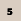
<style>
.page{position:relative;width:21px;height:21px;background:#d9cdc1}
.page>*{position:absolute;margin:0}
.t1{font:9px "Tahoma-Bold";color:#000000}
</style>
<div class="page">
<p class="t1" style="left:7px;top:8px;width:6px;height:7px">5</p>
</div>
